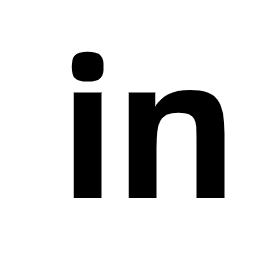
<style>
.page{position:relative;width:280px;height:280px;background:#ffffff}
.page>*{position:absolute;margin:0}
.t1{font:200px "FamiliarPro-Bold";color:#000000}
</style>
<div class="page">
<p class="t1" style="left:71px;top:51px;width:154px;height:147px">in</p>
</div>
